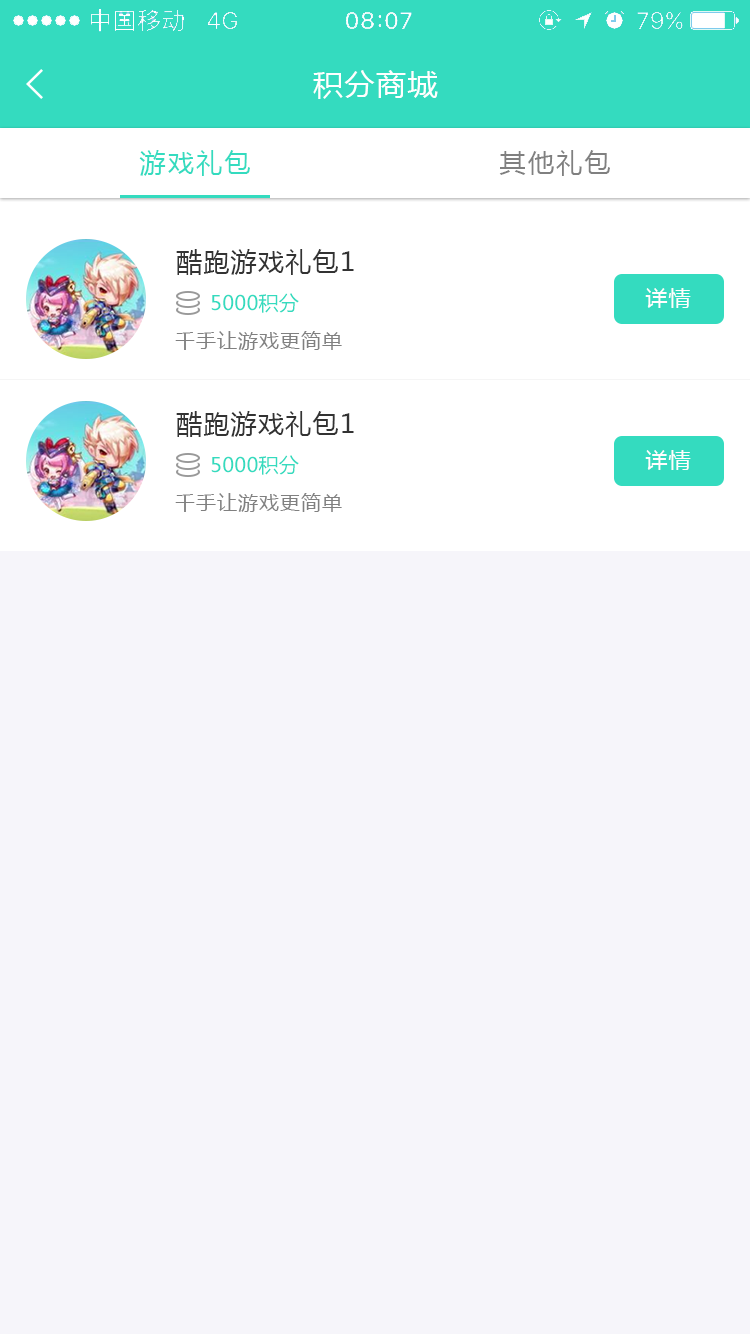
<style>
.page{position:relative;width:750px;height:1334px;background:#f6f5fa}
.page>*{position:absolute;margin:0}
.t1{font:30px "MicrosoftYaHei";letter-spacing:0.05em;color:#ffffff}
.t2{font:26px "MicrosoftYaHei";letter-spacing:0.09em;color:#34dbbf}
.t3{font:26px "MicrosoftYaHei";letter-spacing:0.09em;color:#808080}
.t4{font:26px "MicrosoftYaHei";letter-spacing:0.05em;color:#333333}
.t5{font:20px "MicrosoftYaHei";letter-spacing:0.02em;color:#34dbbf}
.t6{font:22px "MicrosoftYaHei";letter-spacing:0.05em;color:#fefefe}
.t7{font:20px "MicrosoftYaHei";letter-spacing:0.05em;color:#808080}
</style>
<div class="page">
<p class="t1" style="left:313px;top:70px;width:125px;height:29px">积分商城</p>
<p class="t2" style="left:139px;top:150px;width:111px;height:26px">游戏礼包</p>
<p class="t3" style="left:499px;top:150px;width:111px;height:26px">其他礼包</p>
<p class="t4" style="left:176px;top:249px;width:178px;height:26px">酷跑游戏礼包1</p>
<p class="t5" style="left:211px;top:293px;width:88px;height:20px">5000积分</p>
<p class="t6" style="left:645px;top:288px;width:46px;height:20px">详情</p>
<p class="t7" style="left:175px;top:331px;width:167px;height:19px">千手让游戏更简单</p>
<p class="t4" style="left:176px;top:411px;width:178px;height:26px">酷跑游戏礼包1</p>
<p class="t5" style="left:211px;top:455px;width:88px;height:20px">5000积分</p>
<p class="t6" style="left:645px;top:450px;width:46px;height:20px">详情</p>
<p class="t7" style="left:175px;top:493px;width:167px;height:19px">千手让游戏更简单</p>
</div>
